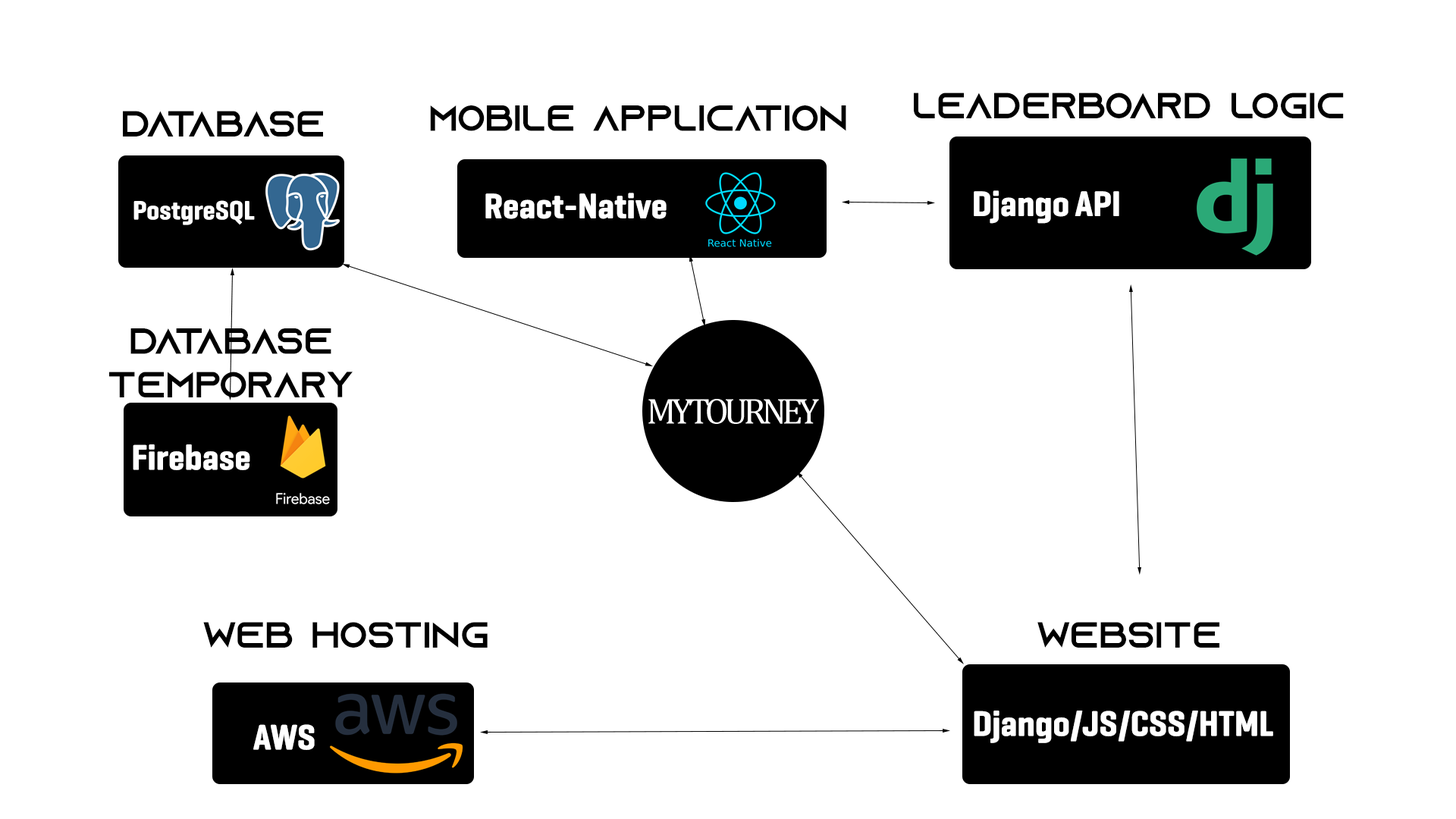
<style>
.page{position:relative;width:1456px;height:819px;background:#ffffff}
.page>*{position:absolute;margin:0}
.t1{font:36.4px "AzonixRegular";color:#000000}
.t2{font:36.4px "GeogrotesqueCondW03-Bold";color:#ffffff}
.t3{font:27.3px "GeogrotesqueCondW03-Bold";color:#ffffff}
</style>
<div class="page">
<p class="t1" style="left:914px;top:93px;width:430px;height:25px">Leaderboard Logic</p>
<p class="t1" style="left:123px;top:111px;width:200px;height:25px">Database</p>
<p class="t1" style="left:430px;top:105px;width:416px;height:26px">MOBILE APPLICATION</p>
<p class="t2" style="left:485px;top:193px;width:182px;height:26px">React-Native</p>
<p class="t2" style="left:974px;top:190px;width:145px;height:34px">Django API</p>
<p class="t3" style="left:133px;top:200px;width:122px;height:25px">PostgreSQL</p>
<p class="t1" style="left:109px;top:328px;width:244px;height:69px;text-align:center">Database<br>Temporary</p>
<p class="t2" style="left:133px;top:444px;width:117px;height:26px">Firebase</p>
<p class="t1" style="left:203px;top:622px;width:285px;height:26px">WEB HOSTING</p>
<p class="t1" style="left:1037px;top:622px;width:182px;height:26px">WEBSITE</p>
<p class="t2" style="left:974px;top:711px;width:299px;height:32px">Django/JS/CSS/HTML</p>
<p class="t2" style="left:253px;top:724px;width:62px;height:26px">AWS</p>
</div>
